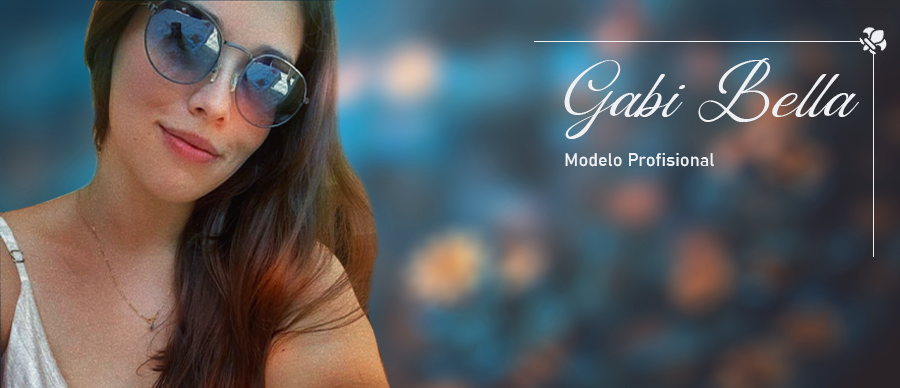
<style>
.page{position:relative;width:900px;height:388px}
.page>*{position:absolute;margin:0}
.t1{font:85.6px "Florilane-Cardillac";color:#eff0f3}
.t2{font:18px "Bahnschrift";color:#eff0f3}
</style>
<div class="page">
<p class="t1" style="left:564px;top:58px;width:295px;height:81px">Gabi Bella</p>
<p class="t2" style="left:565px;top:153px;width:149px;height:14px">Modelo Profisional</p>
</div>
